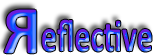
<style>
.page{position:relative;width:153px;height:55px;background:#ffffff}
.page>*{position:absolute;margin:0}
.t1{font:69px "Calibri-Bold"}
.t2{font:45.7px "Calibri-Bold";scale:0.69 1}
</style>
<div class="page">
<p class="t1" style="left:4px;top:9px;width:33px;height:45px;rotate:180deg">R</p>
<p class="t2" style="left:42px;top:19px;width:110px;height:33px">eflective</p>
</div>
